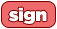
<style>
.page{position:relative;width:57px;height:29px;background:#ef6b6b}
.page>*{position:absolute;margin:0}
.t1{font:18px "Gotham-Ultra";letter-spacing:-0.01em;color:#ffffff}
</style>
<div class="page">
<p class="t1" style="left:9px;top:7px;width:38px;height:17px">sign</p>
</div>
